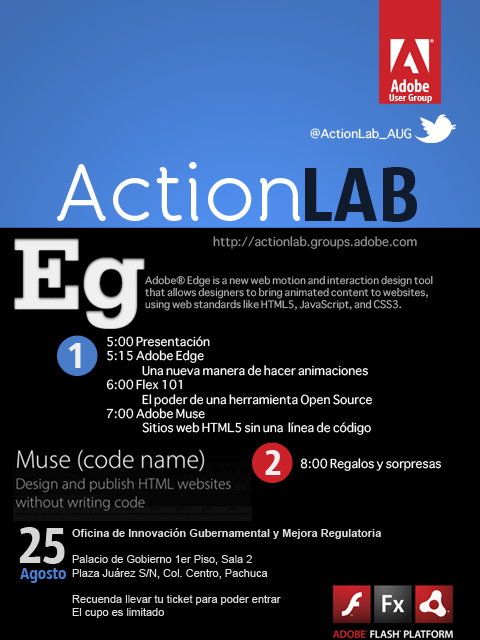
<style>
.page{position:relative;width:480px;height:640px;background:#000000}
.page>*{position:absolute;margin:0}
.t1{font:10px "SansusWebissimo";color:#ffffff}
.t2{font:12px "Sathu";color:#ffffff}
.t3{font:81.2px "BandaRegular";color:#ffffff}
.t4{font:81.2px "SansusWebissimo";color:#101c2d}
.t5{font:12px "Sathu";color:#929292}
.t6{font:10px "Sathu";color:#b2b1b1}
.t7{font:38.2px "SansusWebissimo";color:#efefef}
.t8{font:53.3px "SansusWebissimo";color:#d5d5d5}
.t9{font:11px "ArialMT";color:#dbdbdb}
.t10{font:11px "Arial-BoldMT";color:#dbdbdb}
.t11{font:16.7px "SansusWebissimo";color:#477ed1}
</style>
<div class="page">
<p class="t1" style="left:389px;top:94px;width:43px;height:9px">User Group</p>
<p class="t2" style="left:310px;top:128px;width:102px;height:12px">@ActionLab_AUG</p>
<p class="t3" style="left:57px;top:162px;width:243px;height:59px">Action</p>
<p class="t4" style="left:305px;top:167px;width:112px;height:55px">LAB</p>
<p class="t5" style="left:213px;top:236px;width:204px;height:13px">http://actionlab.groups.adobe.com</p>
<p class="t6" style="left:145px;top:275px;width:288px;height:36px">Adobe® Edge is a new web motion and interaction design tool <br>that allows designers to bring animated content to websites, <br>using web standards like HTML5, JavaScript, and CSS3.</p>
<p class="t2" style="left:106px;top:336px;width:266px;height:99px">5:00 Presentación<br>5:15 Adobe Edge <br> Una nueva manera de hacer animaciones<br>6:00 Flex 101<br> El poder de una herramienta Open Source<br>7:00 Adobe Muse<br> Sitios web HTML5 sin una  línea de código</p>
<p class="t7" style="left:68px;top:343px;width:13px;height:25px">1</p>
<p class="t7" style="left:265px;top:450px;width:16px;height:25px">2</p>
<p class="t2" style="left:300px;top:458px;width:141px;height:13px">8:00 Regalos y sorpresas</p>
<p class="t8" style="left:19px;top:527px;width:46px;height:37px">25</p>
<p class="t9" style="left:72px;top:528px;width:309px;height:90px"><span class="t10">Oficina de Innovación Gubernamental y Mejora Regulatoria<br></span><br>Palacio de Gobierno 1er Piso, Sala 2 <br>Plaza Juárez S/N, Col. Centro, Pachuca<br><br>Recuenda llevar tu ticket para poder entrar<br>El cupo es limitado</p>
<p class="t11" style="left:20px;top:568px;width:46px;height:15px">Agosto</p>
</div>
